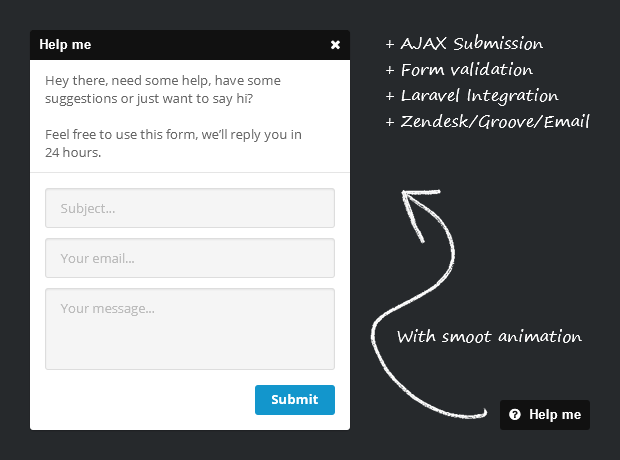
<style>
.page{position:relative;width:620px;height:460px;background:#26292c}
.page>*{position:absolute;margin:0}
.t1{font:13px "Arial-BoldMT";letter-spacing:0.01em;color:#ffffff}
.t2{font:16px/26px "SegoePrint";letter-spacing:0.01em;color:#ffffff}
.t3{font:13px/18px "OpenSans";letter-spacing:0.01em;color:#666666}
.t4{font:13px "OpenSans";letter-spacing:0.01em;color:#bbbbbb}
.t5{font:16px "SegoePrint";letter-spacing:0.01em;color:#ffffff}
.t6{font:13px "OpenSans-Bold";letter-spacing:0.01em;color:#ffffff}
</style>
<div class="page">
<p class="t1" style="left:40px;top:39px;width:51px;height:13px">Help me</p>
<p class="t2" style="left:386px;top:34px;width:204px;height:95px">+ AJAX Submission<br>+ Form validation<br>+ Laravel Integration<br>+ Zendesk/Groove/Email</p>
<p class="t3" style="left:45px;top:75px;width:256px;height:82px">Hey there, need some help, have some suggestions or just want to say hi? <br><br>Feel free to use this form, we’ll reply you in 24 hours.</p>
<p class="t4" style="left:61px;top:203px;width:54px;height:13px">Subject...</p>
<p class="t4" style="left:60px;top:253px;width:74px;height:10px">Your email...</p>
<p class="t4" style="left:60px;top:304px;width:94px;height:12px">Your message...</p>
<p class="t5" style="left:397px;top:329px;width:185px;height:14px">With smoot animation</p>
<p class="t6" style="left:272px;top:394px;width:46px;height:10px">Submit</p>
</div>
